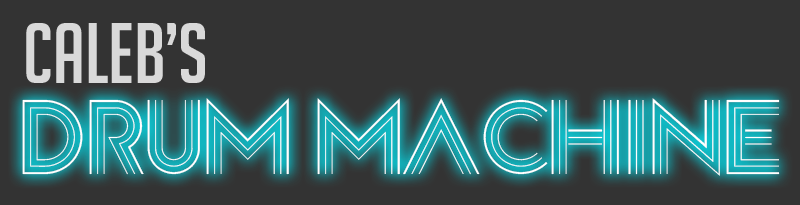
<style>
.page{position:relative;width:800px;height:205px;background:#333333}
.page>*{position:absolute;margin:0}
.t1{font:83.5px "BigNoodleTitling";color:#d9d9d9}
.t2{font:75.8px "DiscoDiva";color:#ffffff}
</style>
<div class="page">
<p class="t1" style="left:26px;top:23px;width:179px;height:60px">Caleb’s</p>
<p class="t2" style="left:22px;top:98px;width:758px;height:78px">Drum Machine</p>
</div>
